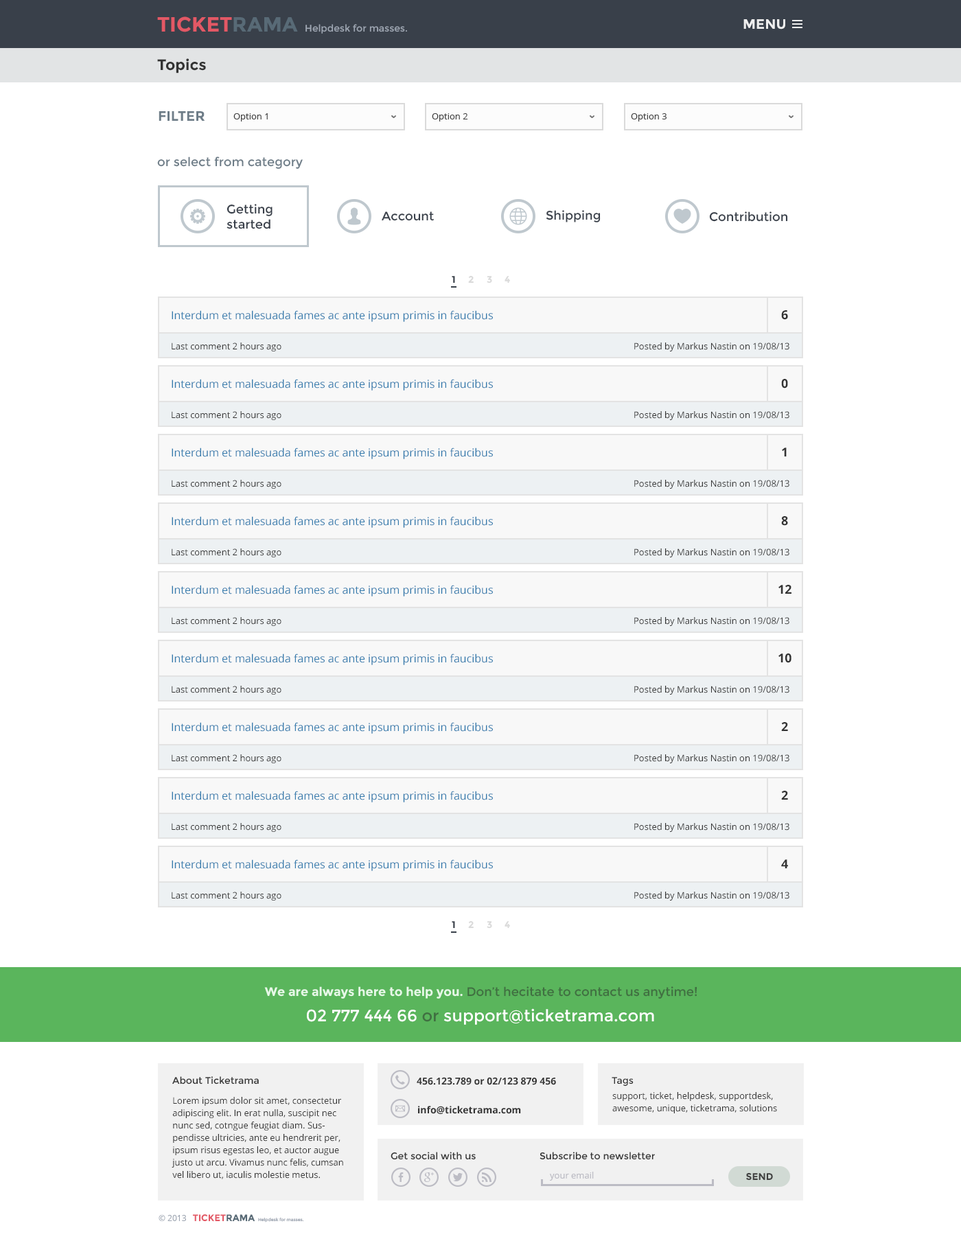
<style>
.page{position:relative;width:961px;height:1241px;background:#ffffff}
.page>*{position:absolute;margin:0}
.t1{font:20.6px "Montserrat-Bold";color:#e35865;text-transform:uppercase}
.t2{font:20.6px "Montserrat-Bold";color:#586a76;text-transform:uppercase}
.t3{font:9.6px "Montserrat-Regular";color:#9ea6b2}
.t4{font:13.7px "Montserrat-Bold";color:#eeeeee;text-transform:uppercase}
.t5{font:15.1px "Montserrat-Bold";color:#333333}
.t6{font:13.7px "Montserrat-Bold";color:#6e7d88;text-transform:uppercase}
.t7{font:8.9px "OpenSans";color:#3e3e3e}
.t8{font:12.4px "Montserrat-Regular";color:#6e7d88}
.t9{font:12.4px/15.1px "Montserrat-Regular";color:#39404a}
.t10{font:12.4px "Montserrat-Regular";color:#39404a}
.t11{font:9.6px "Montserrat-Bold";color:#39404a}
.t12{font:9.6px "Montserrat-Bold";color:#dadada}
.t13{font:11px "OpenSans";color:#347bad}
.t14{font:12.4px "OpenSans-Bold";color:#333333}
.t15{font:8.9px "OpenSans";color:#333333}
.t16{font:12.4px "Montserrat-Regular";color:#406f41}
.t17{font:12.4px "Montserrat-Bold";color:#e6f8e7}
.t18{font:16.5px "Montserrat-Regular";color:#ffffff}
.t19{font:16.5px "Montserrat-Regular";color:#406f41}
.t20{font:9.6px "Montserrat-Regular";color:#333333}
.t21{font:9.6px "OpenSans-Bold";color:#333333}
.t22{font:8.9px/12.4px "OpenSans";color:#333333}
.t23{font:8.9px "OpenSans";color:#bcbcc4}
.t24{font:9.6px "Montserrat-Bold";color:#3e3e3e;text-transform:uppercase}
.t25{font:8.2px "OpenSans";color:#9ea6b2}
.t26{font:9.4px "Montserrat-Bold";color:#e35865;text-transform:uppercase}
.t27{font:9.4px "Montserrat-Bold";color:#586a76;text-transform:uppercase}
.t28{font:4.4px "Montserrat-Regular";color:#9ea6b2}
</style>
<div class="page">
<p class="t1" style="left:157px;top:16px;width:141px;height:16px">Ticket<span class="t2">rama</span></p>
<p class="t3" style="left:305px;top:24px;width:102px;height:10px">Helpdesk for masses.</p>
<p class="t4" style="left:743px;top:19px;width:42px;height:11px">Menu</p>
<p class="t5" style="left:157px;top:58px;width:49px;height:15px">Topics</p>
<p class="t6" style="left:159px;top:111px;width:46px;height:10px">Filter</p>
<p class="t7" style="left:233px;top:113px;width:35px;height:8px">Option 1</p>
<p class="t7" style="left:432px;top:113px;width:36px;height:8px">Option 2</p>
<p class="t7" style="left:631px;top:113px;width:35px;height:8px">Option 3</p>
<p class="t8" style="left:157px;top:156px;width:146px;height:13px">or select from category</p>
<p class="t9" style="left:226px;top:204px;width:46px;height:25px">Getting<br>started</p>
<p class="t10" style="left:382px;top:211px;width:52px;height:10px">Account</p>
<p class="t10" style="left:546px;top:210px;width:55px;height:12px">Shipping</p>
<p class="t10" style="left:709px;top:211px;width:79px;height:11px">Contribution</p>
<p class="t11" style="left:452px;top:276px;width:3px;height:7px">1</p>
<p class="t12" style="left:468px;top:275px;width:6px;height:8px">2</p>
<p class="t12" style="left:487px;top:276px;width:5px;height:7px">3</p>
<p class="t12" style="left:504px;top:276px;width:6px;height:7px">4</p>
<p class="t13" style="left:172px;top:310px;width:321px;height:12px">Interdum et malesuada fames ac ante ipsum primis in faucibus</p>
<p class="t14" style="left:781px;top:310px;width:7px;height:10px">6</p>
<p class="t15" style="left:172px;top:342px;width:109px;height:9px">Last comment 2 hours ago</p>
<p class="t15" style="left:634px;top:342px;width:155px;height:9px">Posted by Markus Nastin on 19/08/13</p>
<p class="t13" style="left:172px;top:379px;width:321px;height:12px">Interdum et malesuada fames ac ante ipsum primis in faucibus</p>
<p class="t14" style="left:781px;top:379px;width:7px;height:9px">0</p>
<p class="t15" style="left:172px;top:411px;width:109px;height:9px">Last comment 2 hours ago</p>
<p class="t15" style="left:634px;top:411px;width:155px;height:9px">Posted by Markus Nastin on 19/08/13</p>
<p class="t13" style="left:172px;top:448px;width:321px;height:11px">Interdum et malesuada fames ac ante ipsum primis in faucibus</p>
<p class="t14" style="left:782px;top:448px;width:5px;height:8px">1</p>
<p class="t15" style="left:172px;top:480px;width:109px;height:9px">Last comment 2 hours ago</p>
<p class="t15" style="left:634px;top:480px;width:155px;height:9px">Posted by Markus Nastin on 19/08/13</p>
<p class="t13" style="left:172px;top:516px;width:321px;height:12px">Interdum et malesuada fames ac ante ipsum primis in faucibus</p>
<p class="t14" style="left:781px;top:516px;width:7px;height:10px">8</p>
<p class="t15" style="left:172px;top:548px;width:109px;height:9px">Last comment 2 hours ago</p>
<p class="t15" style="left:634px;top:548px;width:155px;height:9px">Posted by Markus Nastin on 19/08/13</p>
<p class="t13" style="left:172px;top:585px;width:321px;height:11px">Interdum et malesuada fames ac ante ipsum primis in faucibus</p>
<p class="t14" style="left:778px;top:585px;width:13px;height:9px">12</p>
<p class="t15" style="left:172px;top:617px;width:109px;height:9px">Last comment 2 hours ago</p>
<p class="t15" style="left:634px;top:617px;width:155px;height:9px">Posted by Markus Nastin on 19/08/13</p>
<p class="t13" style="left:172px;top:653px;width:321px;height:12px">Interdum et malesuada fames ac ante ipsum primis in faucibus</p>
<p class="t14" style="left:778px;top:653px;width:13px;height:10px">10</p>
<p class="t15" style="left:172px;top:686px;width:109px;height:9px">Last comment 2 hours ago</p>
<p class="t15" style="left:634px;top:686px;width:155px;height:9px">Posted by Markus Nastin on 19/08/13</p>
<p class="t13" style="left:172px;top:722px;width:321px;height:12px">Interdum et malesuada fames ac ante ipsum primis in faucibus</p>
<p class="t14" style="left:781px;top:722px;width:7px;height:9px">2</p>
<p class="t15" style="left:172px;top:754px;width:109px;height:9px">Last comment 2 hours ago</p>
<p class="t15" style="left:634px;top:754px;width:155px;height:9px">Posted by Markus Nastin on 19/08/13</p>
<p class="t13" style="left:172px;top:791px;width:321px;height:11px">Interdum et malesuada fames ac ante ipsum primis in faucibus</p>
<p class="t14" style="left:781px;top:791px;width:7px;height:9px">2</p>
<p class="t15" style="left:172px;top:823px;width:109px;height:9px">Last comment 2 hours ago</p>
<p class="t15" style="left:634px;top:823px;width:155px;height:9px">Posted by Markus Nastin on 19/08/13</p>
<p class="t13" style="left:172px;top:859px;width:321px;height:12px">Interdum et malesuada fames ac ante ipsum primis in faucibus</p>
<p class="t14" style="left:781px;top:859px;width:7px;height:9px">4</p>
<p class="t15" style="left:172px;top:892px;width:109px;height:9px">Last comment 2 hours ago</p>
<p class="t15" style="left:634px;top:892px;width:155px;height:9px">Posted by Markus Nastin on 19/08/13</p>
<p class="t11" style="left:452px;top:921px;width:3px;height:8px">1</p>
<p class="t12" style="left:468px;top:920px;width:6px;height:9px">2</p>
<p class="t12" style="left:487px;top:921px;width:5px;height:8px">3</p>
<p class="t12" style="left:504px;top:921px;width:6px;height:8px">4</p>
<p class="t16" style="left:264px;top:986px;width:433px;height:13px"><span class="t17">We are always here to help you. </span>Don’t hecitate to contact us anytime!</p>
<p class="t18" style="left:307px;top:1008px;width:347px;height:17px">02 777 444 66 <span class="t19">or </span>support@ticketrama.com</p>
<p class="t20" style="left:172px;top:1076px;width:87px;height:8px">About Ticketrama</p>
<p class="t21" style="left:417px;top:1077px;width:139px;height:8px">456.123.789 or 02/123 879 456</p>
<p class="t20" style="left:612px;top:1077px;width:22px;height:9px">Tags</p>
<p class="t22" style="left:172px;top:1097px;width:171px;height:82px">Lorem ipsum dolor sit amet, consectetur adipiscing elit. In erat nulla, suscipit nec nunc sed, cotngue feugiat diam. Suspendisse ultricies, ante eu hendrerit per, ipsum risus egestas leo, et auctor augue justo ut arcu. Vivamus nunc felis, cumsan vel libero ut, iaculis molestie metus.</p>
<p class="t22" style="left:612px;top:1092px;width:165px;height:21px">support, ticket, helpdesk, supportdesk,<br>awesome, unique, ticketrama, solutions</p>
<p class="t21" style="left:418px;top:1106px;width:103px;height:8px">info@ticketrama.com</p>
<p class="t20" style="left:391px;top:1152px;width:85px;height:8px">Get social with us</p>
<p class="t20" style="left:539px;top:1152px;width:116px;height:8px">Subscribe to newsletter</p>
<p class="t23" style="left:550px;top:1172px;width:44px;height:9px">your email</p>
<p class="t24" style="left:746px;top:1172px;width:27px;height:9px">Send</p>
<p class="t25" style="left:159px;top:1215px;width:27px;height:6px">© 2013</p>
<p class="t26" style="left:192px;top:1214px;width:63px;height:8px">Ticket<span class="t27">rama</span></p>
<p class="t28" style="left:258px;top:1218px;width:46px;height:4px">Helpdesk for masses.</p>
</div>
